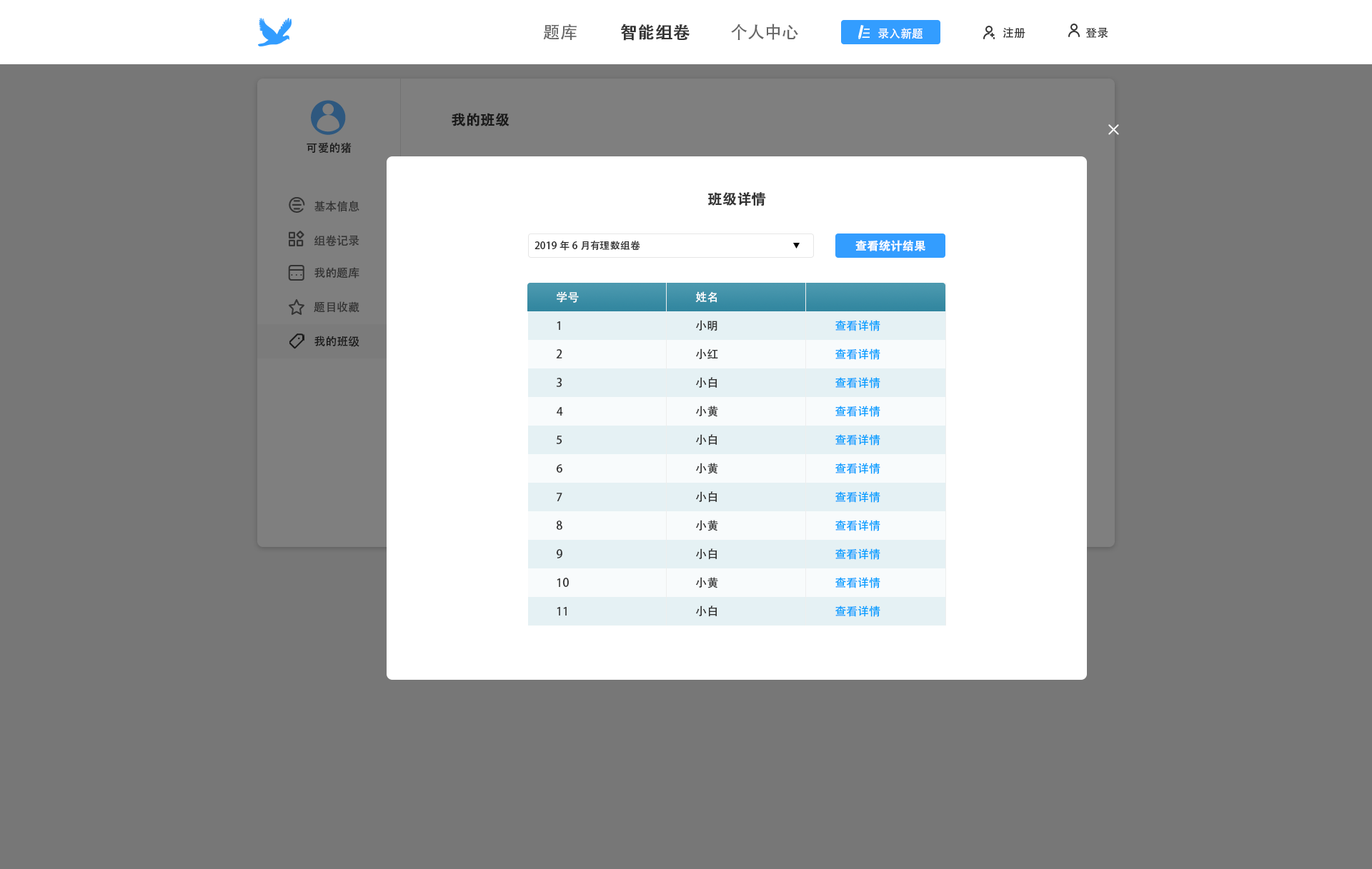
<style>
.page{position:relative;width:1372px;height:869px;background:#777777}
.page>*{position:absolute;margin:0}
.t1{font:17.1px "AdobeHeitiStd-Regular";color:#666666}
.t2{font:17.1px "AdobeHeitiStd-Regular";color:#333333;font-weight:bold}
.t3{font:11.4px "AdobeHeitiStd-Regular";color:#ffffff}
.t4{font:11.4px "AdobeHeitiStd-Regular";color:#333333}
.t5{font:14.3px "AdobeHeitiStd-Regular";color:#191919;font-weight:bold}
.t6{font:11.4px "AdobeHeitiStd-Regular";color:#191919}
.t7{font:14.3px "AdobeHeitiStd-Regular";color:#333333;font-weight:bold}
.t8{font:10px "AdobeHeitiStd-Regular";color:#333333}
.t9{font:11.4px "AdobeHeitiStd-Regular";color:#ffffff;font-weight:bold}
.t10{font:11.4px "AdobeHeitiStd-Regular";color:#049eff}
.t11{font:11.4px "AdobeHeitiStd-Regular";font-weight:bold}
</style>
<div class="page">
<p class="t1" style="left:543px;top:24px;width:33px;height:16px">题库</p>
<p class="t2" style="left:621px;top:24px;width:68px;height:17px">智能组卷</p>
<p class="t1" style="left:731px;top:24px;width:67px;height:16px">个人中心</p>
<p class="t3" style="left:878px;top:28px;width:44px;height:11px">录入新题</p>
<p class="t4" style="left:1002px;top:27px;width:23px;height:12px">注册</p>
<p class="t4" style="left:1085px;top:27px;width:23px;height:12px">登录</p>
<p class="t5" style="left:451px;top:113px;width:58px;height:13px">我的班级</p>
<p class="t6" style="left:306px;top:142px;width:45px;height:12px">可爱的猪</p>
<p class="t7" style="left:708px;top:192px;width:58px;height:14px">班级详情</p>
<p class="t4" style="left:314px;top:201px;width:45px;height:11px">基本信息</p>
<p class="t4" style="left:314px;top:235px;width:45px;height:11px">组卷记录</p>
<p class="t8" style="left:534px;top:241px;width:106px;height:10px">2019年6月有理数组卷</p>
<p class="t9" style="left:855px;top:240px;width:70px;height:11px">查看统计结果</p>
<p class="t4" style="left:314px;top:267px;width:45px;height:12px">我的题库</p>
<p class="t3" style="left:556px;top:291px;width:23px;height:12px">学号</p>
<p class="t3" style="left:695px;top:291px;width:22px;height:12px">姓名</p>
<p class="t4" style="left:314px;top:301px;width:45px;height:12px">题目收藏</p>
<p class="t4" style="left:556px;top:321px;width:4px;height:9px">1</p>
<p class="t4" style="left:696px;top:320px;width:21px;height:11px">小明</p>
<p class="t10" style="left:835px;top:320px;width:45px;height:11px">查看详情</p>
<p class="t6" style="left:314px;top:336px;width:45px;height:11px">我的班级</p>
<p class="t4" style="left:556px;top:349px;width:6px;height:10px">2</p>
<p class="t4" style="left:696px;top:349px;width:22px;height:10px">小红</p>
<p class="t10" style="left:835px;top:349px;width:45px;height:11px">查看详情</p>
<p class="t4" style="left:556px;top:378px;width:6px;height:9px">3</p>
<p class="t4" style="left:696px;top:377px;width:21px;height:12px">小白</p>
<p class="t10" style="left:835px;top:377px;width:45px;height:12px">查看详情</p>
<p class="t4" style="left:556px;top:407px;width:7px;height:9px">4</p>
<p class="t4" style="left:696px;top:406px;width:22px;height:11px">小黄</p>
<p class="t10" style="left:835px;top:406px;width:45px;height:11px">查看详情</p>
<p class="t4" style="left:556px;top:436px;width:6px;height:8px">5</p>
<p class="t4" style="left:696px;top:434px;width:21px;height:12px">小白</p>
<p class="t10" style="left:835px;top:434px;width:45px;height:12px">查看详情</p>
<p class="t4" style="left:556px;top:464px;width:6px;height:9px">6</p>
<p class="t4" style="left:696px;top:463px;width:22px;height:11px">小黄</p>
<p class="t10" style="left:835px;top:463px;width:45px;height:11px">查看详情</p>
<p class="t4" style="left:556px;top:493px;width:6px;height:8px">7</p>
<p class="t4" style="left:696px;top:491px;width:21px;height:12px">小白</p>
<p class="t10" style="left:835px;top:491px;width:45px;height:12px">查看详情</p>
<p class="t4" style="left:556px;top:521px;width:6px;height:9px">8</p>
<p class="t4" style="left:696px;top:520px;width:22px;height:11px">小黄</p>
<p class="t10" style="left:835px;top:520px;width:45px;height:11px">查看详情</p>
<p class="t11" style="left:714px;top:522px;width:5px;height:9px">1</p>
<p class="t4" style="left:556px;top:549px;width:6px;height:10px">9</p>
<p class="t4" style="left:696px;top:549px;width:21px;height:11px">小白</p>
<p class="t10" style="left:835px;top:549px;width:45px;height:11px">查看详情</p>
<p class="t4" style="left:556px;top:578px;width:13px;height:9px">10</p>
<p class="t4" style="left:696px;top:577px;width:22px;height:12px">小黄</p>
<p class="t10" style="left:835px;top:577px;width:45px;height:12px">查看详情</p>
<p class="t4" style="left:696px;top:606px;width:21px;height:11px">小白</p>
<p class="t10" style="left:835px;top:606px;width:45px;height:11px">查看详情</p>
<p class="t4" style="left:556px;top:607px;width:10px;height:9px">11</p>
</div>
